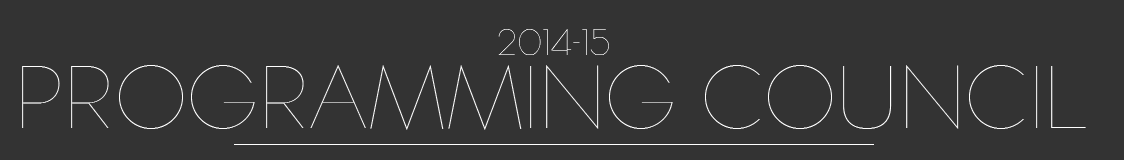
<style>
.page{position:relative;width:1124px;height:160px;background:#333333}
.page>*{position:absolute;margin:0}
.t1{font:33.9px "TYPOGRAPHPRO-UltraLight"}
.t2{font:21px "TYPOGRAPHPRO-UltraLight"}
.t3{font:80.3px "TYPOGRAPHPRO-UltraLight";color:#ffffff}
</style>
<div class="page">
<p class="t1" style="left:498px;top:29px;width:111px;height:26px">2014<span class="t2">-</span>15</p>
<p class="t3" style="left:22px;top:65px;width:1064px;height:65px">PROGRAMMING COUNCIL</p>
</div>
